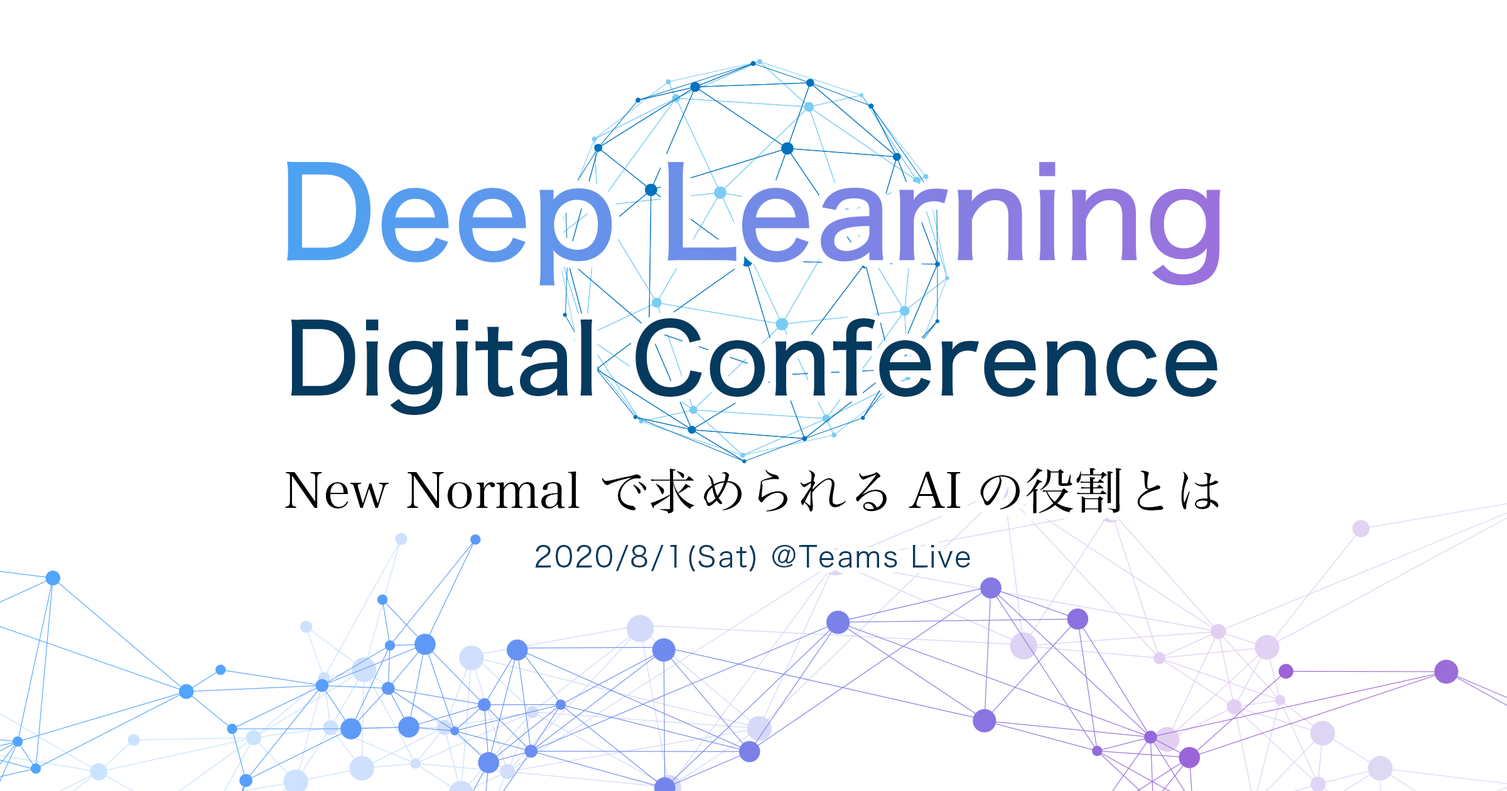
<style>
.page{position:relative;width:1507px;height:791px;background:#ffffff}
.page>*{position:absolute;margin:0}
.t1{font:125.4px "HiraginoSans-W5"}
.t2{font:96.7px "HiraginoSans-W5";color:#043a5e}
.t3{font:49.7px "HiraMinProN-W3";color:#000000}
.t4{font:28.7px "HiraginoSans-W3";letter-spacing:0.05em;color:#043a5e}
</style>
<div class="page">
<p class="t1" style="left:287px;top:161px;width:933px;height:125px">Deep Learning</p>
<p class="t2" style="left:291px;top:318px;width:927px;height:98px">Digital Conference</p>
<p class="t2" style="left:291px;top:318px;width:927px;height:98px">Digital Conference</p>
<p class="t3" style="left:285px;top:468px;width:934px;height:46px">New Normal で求められるAIの役割とは</p>
<p class="t3" style="left:285px;top:468px;width:934px;height:46px">New Normal で求められるAIの役割とは</p>
<p class="t4" style="left:535px;top:545px;width:435px;height:27px">2020/8/1(Sat) @Teams Live</p>
<p class="t4" style="left:535px;top:545px;width:435px;height:27px">2020/8/1(Sat) @Teams Live</p>
</div>
